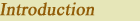
<style>
.page{position:relative;width:140px;height:21px;background:#e6e6b8}
.page>*{position:absolute;margin:0}
.t1{font:18px "TimesNewRomanPSMT";color:#915c07;font-weight:bold;font-style:italic}
</style>
<div class="page">
<p class="t1" style="left:0px;top:2px;width:95px;height:14px">Introduction</p>
</div>
